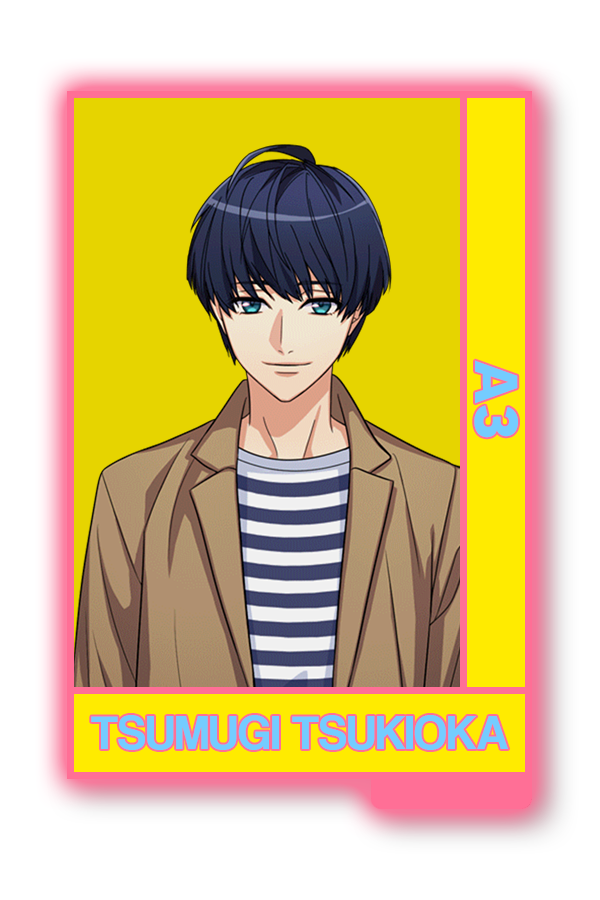
<style>
.page{position:relative;width:600px;height:900px;background:#ffffff}
.page>*{position:absolute;margin:0}
.t1{font:60.5px "MADETOMMY-Bold";color:#74ccff}
.t2{font:49.3px "CoolveticaRg-Regular";color:#74ccff}
</style>
<div class="page">
<p class="t1" style="left:474px;top:360px;width:44px;height:78px;rotate:90deg">A3</p>
<p class="t2" style="left:91px;top:715px;width:418px;height:35px">TSUMUGI TSUKIOKA</p>
</div>
